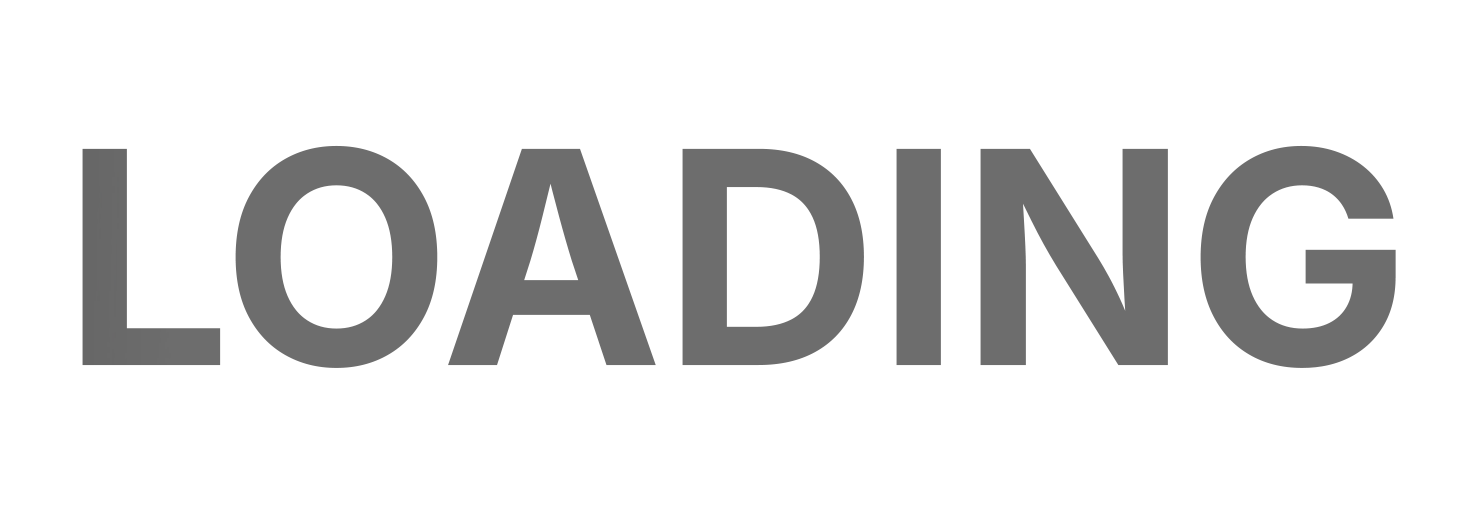
<style>
.page{position:relative;width:1473px;height:515px;background:#ffffff}
.page>*{position:absolute;margin:0}
.t1{font:297.1px "Inter-Bold";color:#6d6d6d}
</style>
<div class="page">
<p class="t1" style="left:82px;top:145px;width:1314px;height:223px">LOADING</p>
</div>
